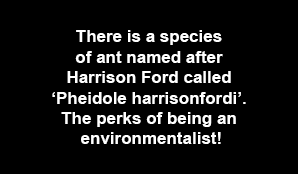
<style>
.page{position:relative;width:298px;height:174px;background:#000000}
.page>*{position:absolute;margin:0}
.t1{font:17px "Arial-BoldMT";color:#ffffff}
</style>
<div class="page">
<p class="t1" style="left:52px;top:30px;width:194px;height:114px;text-align:center">There is a species <br>of ant named after <br>Harrison Ford called <br>‘Pheidole harrisonfordi’. <br>The perks of being an <br>environmentalist!</p>
</div>
